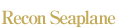
<style>
.page{position:relative;width:135px;height:27px;background:#ffffff}
.page>*{position:absolute;margin:0}
.t1{font:18px "RyuminPro-ExBold";letter-spacing:-0.08em;color:#c4a956}
</style>
<div class="page">
<p class="t1" style="left:1px;top:10px;width:115px;height:17px">Recon Seaplane</p>
</div>
